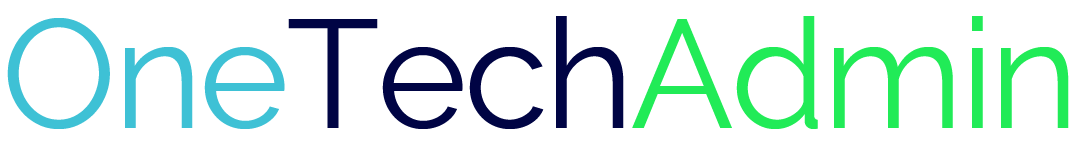
<style>
.page{position:relative;width:1080px;height:150px;background:#ffffff}
.page>*{position:absolute;margin:0}
.t1{font:153px "Raleway";letter-spacing:-0.02em;color:#21eb57}
.t2{font:153px "Raleway";letter-spacing:-0.02em;color:#3ec1d5}
.t3{font:153px "Raleway";letter-spacing:-0.02em;color:#000444}
</style>
<div class="page">
<p class="t1" style="left:7px;top:16px;width:1062px;height:113px"><span class="t2">One</span><span class="t3">Tech</span>Admin</p>
</div>
